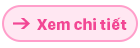
<style>
.page{position:relative;width:140px;height:48px;background:#ffe7f2}
.page>*{position:absolute;margin:0}
.t1{font:16.2px "SanFranciscoDisplay-Heavy";color:#f24795}
</style>
<div class="page">
<p class="t1" style="left:37px;top:17px;width:90px;height:13px">Xem chi tiết</p>
</div>
